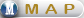
<style>
.page{position:relative;width:84px;height:18px}
.page>*{position:absolute;margin:0}
.t1{font:16px "SimSun";color:#ffffff;font-weight:bold}
.t2{font:14px "ArialRoundedMTBold";letter-spacing:0.3em;color:#ab8725;scale:1.3 1}
</style>
<div class="page">
<p class="t1" style="left:5px;top:3px;width:9px;height:12px">M</p>
<p class="t2" style="left:25px;top:4px;width:50px;height:10px">MAP</p>
</div>
